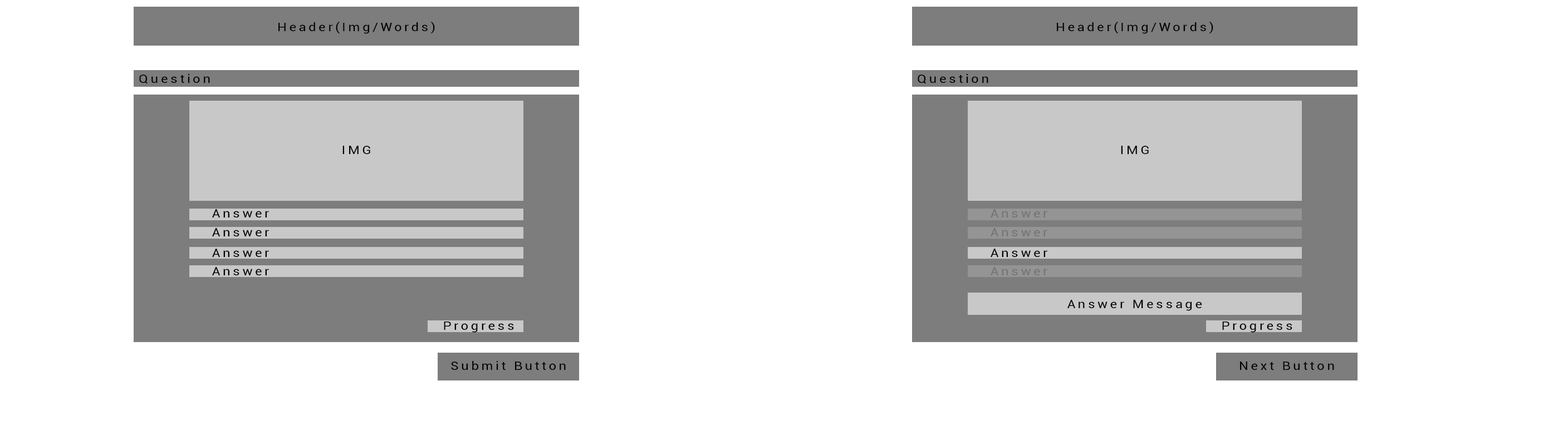
<style>
.page{position:relative;width:1568px;height:445px;background:#ffffff}
.page>*{position:absolute;margin:0}
.t1{font:11.8px "Roboto-Regular";letter-spacing:0.18em;color:#000000;scale:1.14 1}
.t2{font:11.8px "Roboto-Regular";letter-spacing:0.18em;color:#747474;scale:1.14 1}
</style>
<div class="page">
<p class="t1" style="left:278px;top:21px;width:157px;height:13px">Header(Img/Words)</p>
<p class="t1" style="left:1057px;top:21px;width:156px;height:13px">Header(Img/Words)</p>
<p class="t1" style="left:139px;top:74px;width:71px;height:10px">Question</p>
<p class="t1" style="left:918px;top:74px;width:70px;height:10px">Question</p>
<p class="t1" style="left:342px;top:146px;width:28px;height:8px">IMG</p>
<p class="t1" style="left:1121px;top:146px;width:28px;height:8px">IMG</p>
<p class="t1" style="left:212px;top:209px;width:57px;height:9px">Answer</p>
<p class="t2" style="left:991px;top:209px;width:56px;height:9px">Answer</p>
<p class="t1" style="left:212px;top:228px;width:57px;height:9px">Answer</p>
<p class="t2" style="left:991px;top:228px;width:56px;height:9px">Answer</p>
<p class="t1" style="left:212px;top:249px;width:57px;height:8px">Answer</p>
<p class="t1" style="left:991px;top:249px;width:56px;height:8px">Answer</p>
<p class="t1" style="left:212px;top:267px;width:57px;height:9px">Answer</p>
<p class="t2" style="left:991px;top:267px;width:56px;height:9px">Answer</p>
<p class="t1" style="left:1067px;top:300px;width:135px;height:11px">Answer Message</p>
<p class="t1" style="left:444px;top:322px;width:70px;height:11px">Progress</p>
<p class="t1" style="left:1222px;top:322px;width:70px;height:11px">Progress</p>
<p class="t1" style="left:451px;top:361px;width:115px;height:9px">Submit Button</p>
<p class="t1" style="left:1240px;top:362px;width:94px;height:8px">Next Button</p>
</div>
